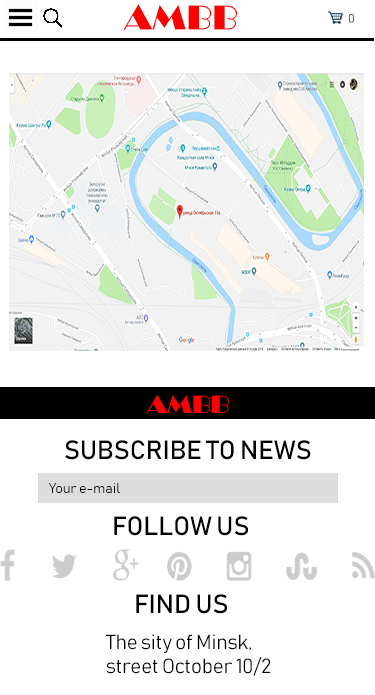
<style>
.page{position:relative;width:375px;height:695px;background:#ffffff}
.page>*{position:absolute;margin:0}
.t1{font:36px "Broadway";color:#ff0000}
.t2{font:12px "Bahnschrift"}
.t3{font:26px "Broadway";color:#ff0000}
.t4{font:26px "Bahnschrift";color:#000000}
.t5{font:14px "Bahnschrift";color:#000000}
.t6{font:20px "Bahnschrift";color:#000000}
</style>
<div class="page">
<p class="t1" style="left:123px;top:4px;width:114px;height:26px">AMBB</p>
<p class="t2" style="left:349px;top:14px;width:5px;height:9px">0</p>
<p class="t3" style="left:146px;top:394px;width:83px;height:20px">AMBB</p>
<p class="t4" style="left:65px;top:440px;width:246px;height:20px">SUBSCRIBE TO NEWS</p>
<p class="t5" style="left:48px;top:483px;width:72px;height:10px">Your e-mail</p>
<p class="t4" style="left:114px;top:516px;width:134px;height:20px">FOLLOW US</p>
<p class="t4" style="left:136px;top:594px;width:91px;height:20px">FIND US</p>
<p class="t6" style="left:105px;top:634px;width:166px;height:42px">The sity of Minsk,<br>street October 10/2</p>
</div>
